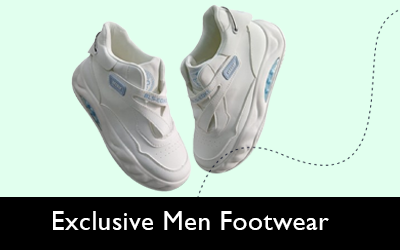
<style>
.page{position:relative;width:400px;height:250px;background:#e1ffee}
.page>*{position:absolute;margin:0}
.t1{font:27px "GillSansMT";letter-spacing:0.02em;color:#ffffff}
</style>
<div class="page">
<p class="t1" style="left:53px;top:211px;width:276px;height:19px">Exclusive Men Footwear</p>
</div>
